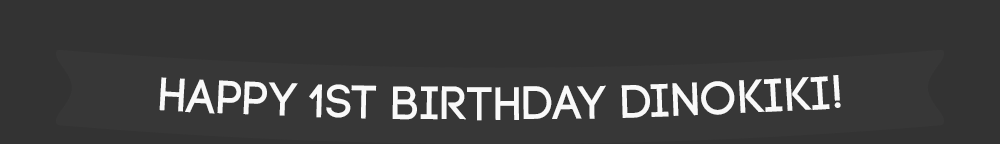
<style>
.page{position:relative;width:1000px;height:144px;background:#333333}
.page>*{position:absolute;margin:0}
.t1{font:80px "Code-Pro-Demo";letter-spacing:0.01em;color:#f9f9f9;text-transform:uppercase}
</style>
<div class="page">
<p class="t1" style="left:159px;top:75px;width:682px;height:46px">happy 1st birthday dinokiki!</p>
</div>
